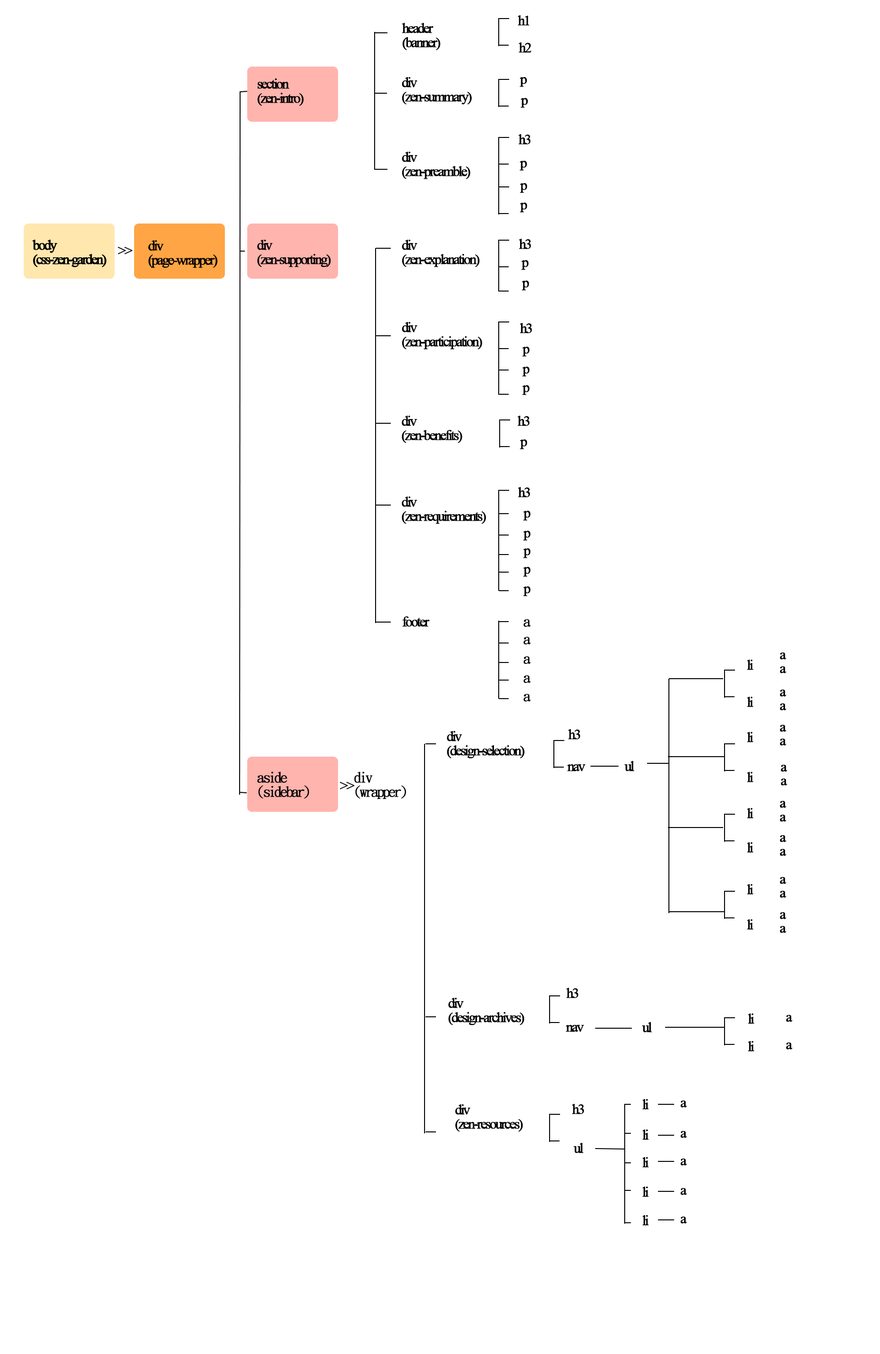
<style>
.page{position:relative;width:880px;height:1354px;background:#ffffff}
.page>*{position:absolute;margin:0}
.t1{font:14.3px "TimesNewRomanPSMT";letter-spacing:-0.125em;color:#000000;font-weight:bold}
.t2{font:14.3px/14.3px "TimesNewRomanPSMT";letter-spacing:-0.125em;color:#000000;font-weight:bold}
.t3{font:14.3px "DFKaiShu-SB-Estd-BF";letter-spacing:-0.125em;color:#000000;font-weight:bold}
.t4{font:14.3px/14.3px "DFKaiShu-SB-Estd-BF";letter-spacing:-0.125em;color:#000000;font-weight:bold}
</style>
<div class="page">
<p class="t1" style="left:518px;top:15px;width:12px;height:11px">h1</p>
<p class="t2" style="left:402px;top:23px;width:39px;height:27px">header<br>(banner)</p>
<p class="t1" style="left:519px;top:42px;width:13px;height:11px">h2</p>
<p class="t2" style="left:402px;top:77px;width:70px;height:28px">div<br>(zen-summary)</p>
<p class="t1" style="left:520px;top:77px;width:8px;height:10px">p</p>
<p class="t2" style="left:257px;top:78px;width:47px;height:28px">section<br>(zen-intro)</p>
<p class="t1" style="left:521px;top:98px;width:7px;height:10px">p</p>
<p class="t1" style="left:518px;top:134px;width:13px;height:11px">h3</p>
<p class="t2" style="left:402px;top:152px;width:69px;height:27px">div<br>(zen-preamble)</p>
<p class="t1" style="left:520px;top:161px;width:8px;height:10px">p</p>
<p class="t1" style="left:520px;top:183px;width:8px;height:10px">p</p>
<p class="t1" style="left:520px;top:203px;width:8px;height:10px">p</p>
<p class="t2" style="left:32px;top:240px;width:75px;height:27px">body<br>(css-zen-garden)</p>
<p class="t2" style="left:32px;top:240px;width:75px;height:27px">body<br>(css-zen-garden)</p>
<p class="t2" style="left:148px;top:240px;width:70px;height:28px">div<br>(page-wrapper)</p>
<p class="t2" style="left:257px;top:240px;width:74px;height:27px">div<br>(zen-supporting)</p>
<p class="t2" style="left:402px;top:240px;width:78px;height:27px">div<br>(zen-explanation)</p>
<p class="t1" style="left:519px;top:239px;width:12px;height:10px">h3</p>
<p class="t1" style="left:118px;top:247px;width:15px;height:7px">&gt;&gt;</p>
<p class="t1" style="left:521px;top:260px;width:8px;height:10px">p</p>
<p class="t1" style="left:522px;top:281px;width:7px;height:10px">p</p>
<p class="t2" style="left:402px;top:322px;width:81px;height:28px">div<br>(zen-participation)</p>
<p class="t1" style="left:520px;top:323px;width:12px;height:10px">h3</p>
<p class="t1" style="left:522px;top:347px;width:8px;height:10px">p</p>
<p class="t1" style="left:522px;top:367px;width:8px;height:10px">p</p>
<p class="t1" style="left:522px;top:385px;width:8px;height:10px">p</p>
<p class="t2" style="left:402px;top:416px;width:61px;height:27px">div<br>(zen-benefits)</p>
<p class="t1" style="left:518px;top:416px;width:12px;height:10px">h3</p>
<p class="t1" style="left:520px;top:440px;width:8px;height:10px">p</p>
<p class="t2" style="left:402px;top:497px;width:85px;height:27px">div<br>(zen-requirements)</p>
<p class="t1" style="left:518px;top:487px;width:12px;height:11px">h3</p>
<p class="t1" style="left:523px;top:511px;width:8px;height:10px">p</p>
<p class="t1" style="left:523px;top:531px;width:8px;height:10px">p</p>
<p class="t1" style="left:523px;top:548px;width:8px;height:10px">p</p>
<p class="t1" style="left:523px;top:567px;width:8px;height:10px">p</p>
<p class="t1" style="left:523px;top:587px;width:8px;height:10px">p</p>
<p class="t1" style="left:402px;top:616px;width:28px;height:11px">footer</p>
<p class="t3" style="left:524px;top:619px;width:7px;height:8px">a</p>
<p class="t3" style="left:524px;top:637px;width:7px;height:8px">a</p>
<p class="t1" style="left:780px;top:653px;width:7px;height:7px">a</p>
<p class="t3" style="left:524px;top:656px;width:7px;height:8px">a</p>
<p class="t1" style="left:747px;top:660px;width:7px;height:10px">li</p>
<p class="t3" style="left:524px;top:675px;width:7px;height:8px">a</p>
<p class="t1" style="left:780px;top:666px;width:7px;height:8px">a</p>
<p class="t1" style="left:780px;top:690px;width:7px;height:7px">a</p>
<p class="t3" style="left:524px;top:694px;width:7px;height:8px">a</p>
<p class="t1" style="left:747px;top:697px;width:7px;height:10px">li</p>
<p class="t1" style="left:780px;top:704px;width:7px;height:7px">a</p>
<p class="t1" style="left:780px;top:725px;width:7px;height:7px">a</p>
<p class="t2" style="left:447px;top:731px;width:78px;height:28px">div<br>(design-selection)</p>
<p class="t1" style="left:568px;top:729px;width:13px;height:11px">h3</p>
<p class="t1" style="left:747px;top:732px;width:7px;height:11px">li</p>
<p class="t1" style="left:780px;top:739px;width:7px;height:7px">a</p>
<p class="t1" style="left:625px;top:761px;width:10px;height:11px">ul</p>
<p class="t4" style="left:257px;top:772px;width:52px;height:27px">aside<br>(sidebar)</p>
<p class="t4" style="left:354px;top:772px;width:52px;height:27px">div<br>(wrapper)</p>
<p class="t1" style="left:567px;top:764px;width:19px;height:8px">nav</p>
<p class="t1" style="left:747px;top:772px;width:7px;height:11px">li</p>
<p class="t1" style="left:781px;top:765px;width:7px;height:7px">a</p>
<p class="t1" style="left:340px;top:782px;width:15px;height:8px">&gt;&gt;</p>
<p class="t1" style="left:781px;top:779px;width:7px;height:7px">a</p>
<p class="t1" style="left:747px;top:808px;width:7px;height:11px">li</p>
<p class="t1" style="left:780px;top:801px;width:7px;height:7px">a</p>
<p class="t1" style="left:780px;top:815px;width:7px;height:7px">a</p>
<p class="t1" style="left:747px;top:842px;width:7px;height:11px">li</p>
<p class="t1" style="left:780px;top:835px;width:7px;height:7px">a</p>
<p class="t1" style="left:780px;top:849px;width:7px;height:7px">a</p>
<p class="t1" style="left:780px;top:877px;width:7px;height:7px">a</p>
<p class="t1" style="left:747px;top:884px;width:7px;height:11px">li</p>
<p class="t1" style="left:780px;top:891px;width:7px;height:7px">a</p>
<p class="t1" style="left:780px;top:912px;width:7px;height:8px">a</p>
<p class="t1" style="left:747px;top:920px;width:7px;height:10px">li</p>
<p class="t1" style="left:780px;top:926px;width:7px;height:7px">a</p>
<p class="t1" style="left:567px;top:988px;width:12px;height:10px">h3</p>
<p class="t2" style="left:449px;top:998px;width:76px;height:28px">div<br>(design-archives)</p>
<p class="t1" style="left:748px;top:1014px;width:7px;height:10px">li</p>
<p class="t1" style="left:566px;top:1025px;width:19px;height:7px">nav</p>
<p class="t1" style="left:642px;top:1022px;width:10px;height:11px">ul</p>
<p class="t1" style="left:786px;top:1015px;width:7px;height:7px">a</p>
<p class="t1" style="left:748px;top:1041px;width:7px;height:11px">li</p>
<p class="t1" style="left:786px;top:1043px;width:7px;height:7px">a</p>
<p class="t2" style="left:455px;top:1105px;width:68px;height:27px">div<br>(zen-resources)</p>
<p class="t1" style="left:572px;top:1104px;width:13px;height:11px">h3</p>
<p class="t1" style="left:643px;top:1099px;width:6px;height:11px">li</p>
<p class="t1" style="left:681px;top:1101px;width:6px;height:7px">a</p>
<p class="t1" style="left:643px;top:1130px;width:6px;height:10px">li</p>
<p class="t1" style="left:681px;top:1131px;width:6px;height:7px">a</p>
<p class="t1" style="left:574px;top:1143px;width:10px;height:11px">ul</p>
<p class="t1" style="left:643px;top:1157px;width:6px;height:11px">li</p>
<p class="t1" style="left:681px;top:1159px;width:6px;height:7px">a</p>
<p class="t1" style="left:643px;top:1187px;width:6px;height:10px">li</p>
<p class="t1" style="left:681px;top:1188px;width:6px;height:7px">a</p>
<p class="t1" style="left:643px;top:1215px;width:6px;height:11px">li</p>
<p class="t1" style="left:681px;top:1217px;width:6px;height:7px">a</p>
</div>
